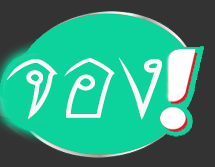
<style>
.page{position:relative;width:215px;height:167px;background:#0cd29c}
.page>*{position:absolute;margin:0}
.t1{font:145.5px "THSrisakdi";color:#fcf8f8;scale:1.13 1}
</style>
<div class="page">
<p class="t1" style="left:6px;top:57px;width:156px;height:63px">จอง</p>
</div>
